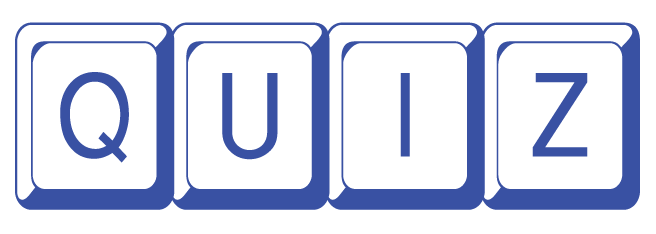
<style>
.page{position:relative;width:656px;height:234px;background:#ffffff}
.page>*{position:absolute;margin:0}
.t1{font:228.9px "Keyboard66";letter-spacing:-0.06em;color:#3951a3;scale:0.86 1}
</style>
<div class="page">
<p class="t1" style="left:15px;top:22px;width:625px;height:188px">QUIZ</p>
</div>
